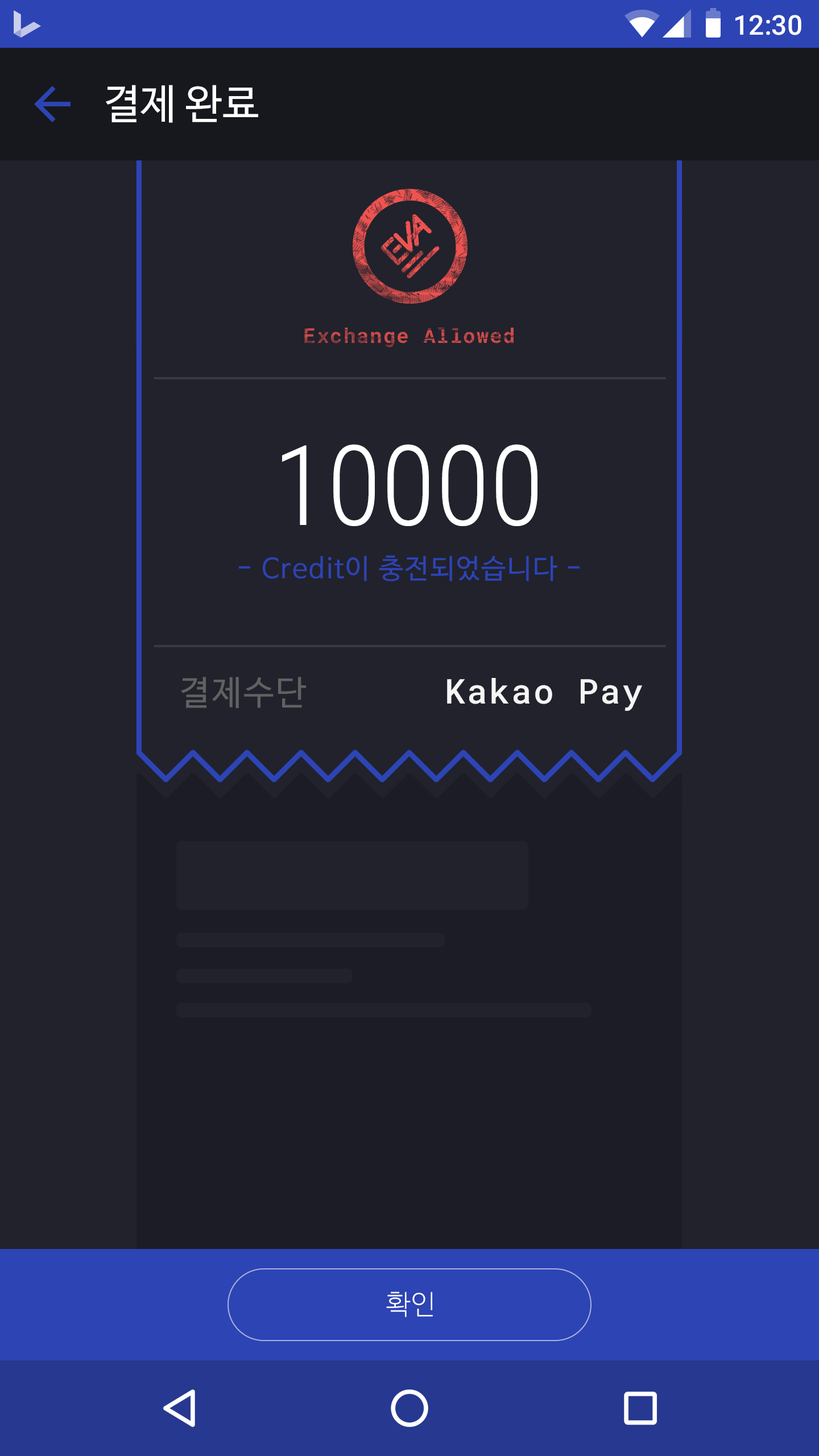
<style>
.page{position:relative;width:819px;height:1456px;background:#21222c}
.page>*{position:absolute;margin:0}
.t1{font:27.3px "Roboto-Medium";color:#ffffff}
.t2{font:40.9px "NanumBarunGothic";color:#ffffff}
.t3{font:111.5px "RobotoCondensed-Light";color:#ffffff}
.t4{font:27.3px "NanumBarunGothic";letter-spacing:0.05em;color:#2d44b5}
.t5{font:34.1px "NanumBarunGothic";letter-spacing:0.05em;color:#616161}
.t6{font:34.1px "RobotoMono-Medium";letter-spacing:0.05em;color:#f5f5f5}
.t7{font:27.3px "NanumBarunGothicLight";letter-spacing:0.025em;color:#ffffff}
</style>
<div class="page">
<p class="t1" style="left:735px;top:15px;width:66px;height:20px">12:30</p>
<p class="t2" style="left:106px;top:85px;width:152px;height:38px">결제 완료</p>
<p class="t3" style="left:282px;top:444px;width:255px;height:82px">10000</p>
<p class="t4" style="left:239px;top:555px;width:341px;height:26px">- Credit이 충전되었습니다 -</p>
<p class="t5" style="left:181px;top:677px;width:125px;height:31px">결제수단</p>
<p class="t6" style="left:447px;top:678px;width:195px;height:33px">Kakao Pay</p>
<p class="t7" style="left:386px;top:1292px;width:47px;height:25px">확인</p>
</div>
